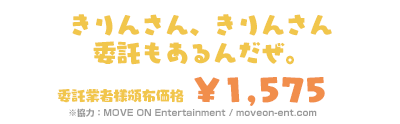
<style>
.page{position:relative;width:400px;height:124px;background:#ffffff}
.page>*{position:absolute;margin:0}
.t1{font:24px/27.1px "YurukaStd-UB";color:#f1c64c}
.t2{font:29.9px "YurukaStd-UB";color:#f18e4c}
.t3{font:14.1px "YurukaStd-UB";color:#f1c64c}
.t4{font:8.8px "ShinGoPro-Bold";color:#999999}
</style>
<div class="page">
<p class="t1" style="left:72px;top:14px;width:260px;height:51px;text-align:center">きりんさん、きりんさん<br>委託もあるんだぜ。</p>
<p class="t2" style="left:194px;top:76px;width:131px;height:30px">￥1,575</p>
<p class="t3" style="left:57px;top:89px;width:127px;height:14px">委託業者様頒布価格</p>
<p class="t4" style="left:69px;top:108px;width:248px;height:9px">※協力：MOVE ON Entertainment / moveon-ent.com</p>
</div>
